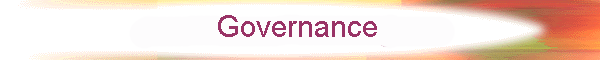
<style>
.page{position:relative;width:600px;height:60px;background:#ffffff}
.page>*{position:absolute;margin:0}
.t1{font:30px "ArialMT";color:#993366}
</style>
<div class="page">
<p class="t1" style="left:218px;top:15px;width:159px;height:22px">Governance</p>
</div>
